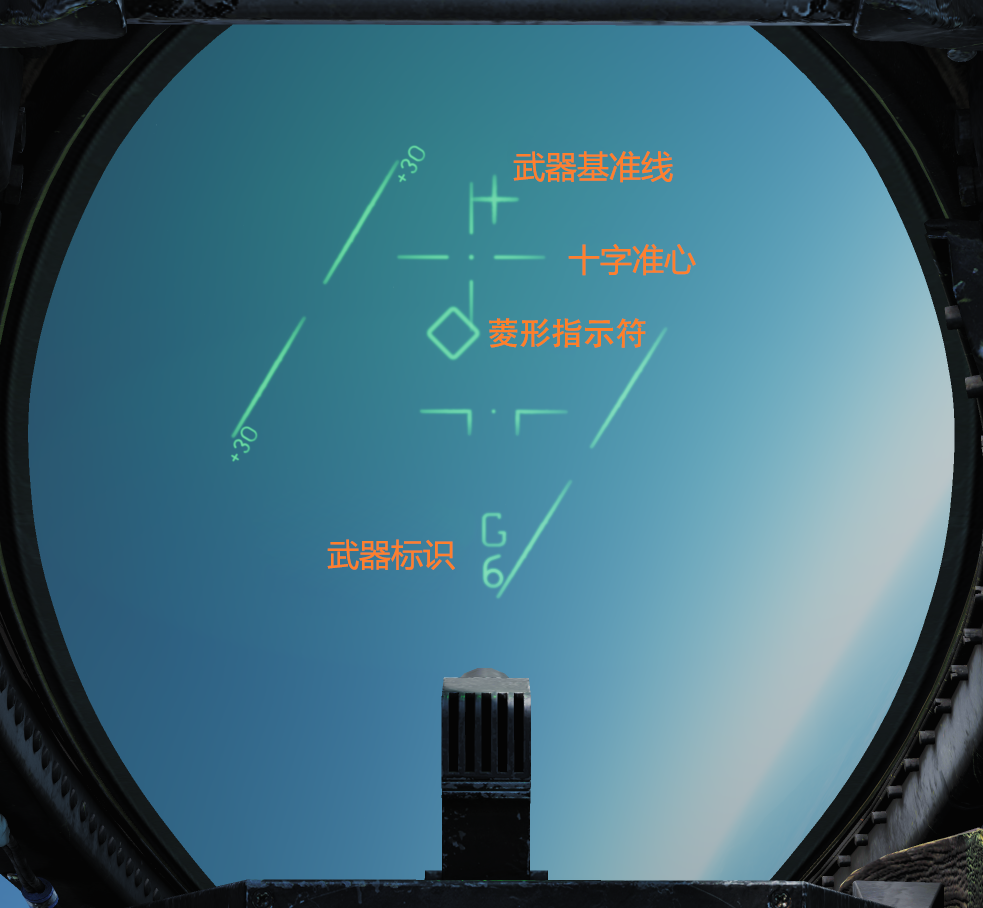
<style>
.page{position:relative;width:983px;height:908px}
.page>*{position:absolute;margin:0}
.t1{font:32px "MicrosoftYaHei";color:#ff7f2c}
.t2{font:32px "AdobeHeitiStd-Regular";color:#ff7f27}
</style>
<div class="page">
<p class="t1" style="left:513px;top:151px;width:160px;height:32px">武器基准线</p>
<p class="t1" style="left:568px;top:244px;width:128px;height:32px">十字准心</p>
<p class="t2" style="left:489px;top:318px;width:157px;height:30px">菱形指示符</p>
<p class="t1" style="left:327px;top:539px;width:128px;height:31px">武器标识</p>
</div>
